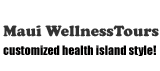
<style>
.page{position:relative;width:160px;height:71px;background:#ffffff}
.page>*{position:absolute;margin:0}
.t1{font:15.5px "CooperBlack";color:#333333}
.t2{font:12px "Impact";color:#010000}
</style>
<div class="page">
<p class="t1" style="left:3px;top:25px;width:156px;height:12px">Maui WellnessTours</p>
<p class="t2" style="left:3px;top:45px;width:153px;height:11px">customized health island style!</p>
</div>
